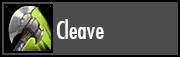
<style>
.page{position:relative;width:180px;height:57px;background:#4c4c4c}
.page>*{position:absolute;margin:0}
.t1{font:24px "FuturaCondensed";color:#ffffff}
</style>
<div class="page">
<p class="t1" style="left:57px;top:19px;width:47px;height:20px">Cleave</p>
</div>
